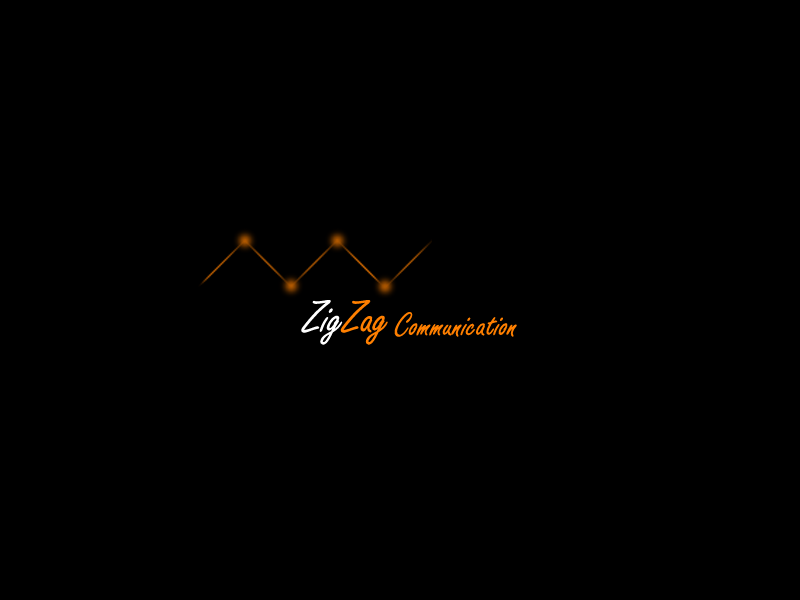
<style>
.page{position:relative;width:800px;height:600px;background:#000000}
.page>*{position:absolute;margin:0}
.t1{font:48px "FreestyleScript-Regular";color:#ffffff}
.t2{font:48px "FreestyleScript-Regular";color:#ff8000}
.t3{font:36px "FreestyleScript-Regular";color:#ff8000}
</style>
<div class="page">
<p class="t1" style="left:301px;top:300px;width:87px;height:45px">Zig<span class="t2">Zag</span></p>
<p class="t3" style="left:394px;top:312px;width:123px;height:25px">Communication</p>
</div>
